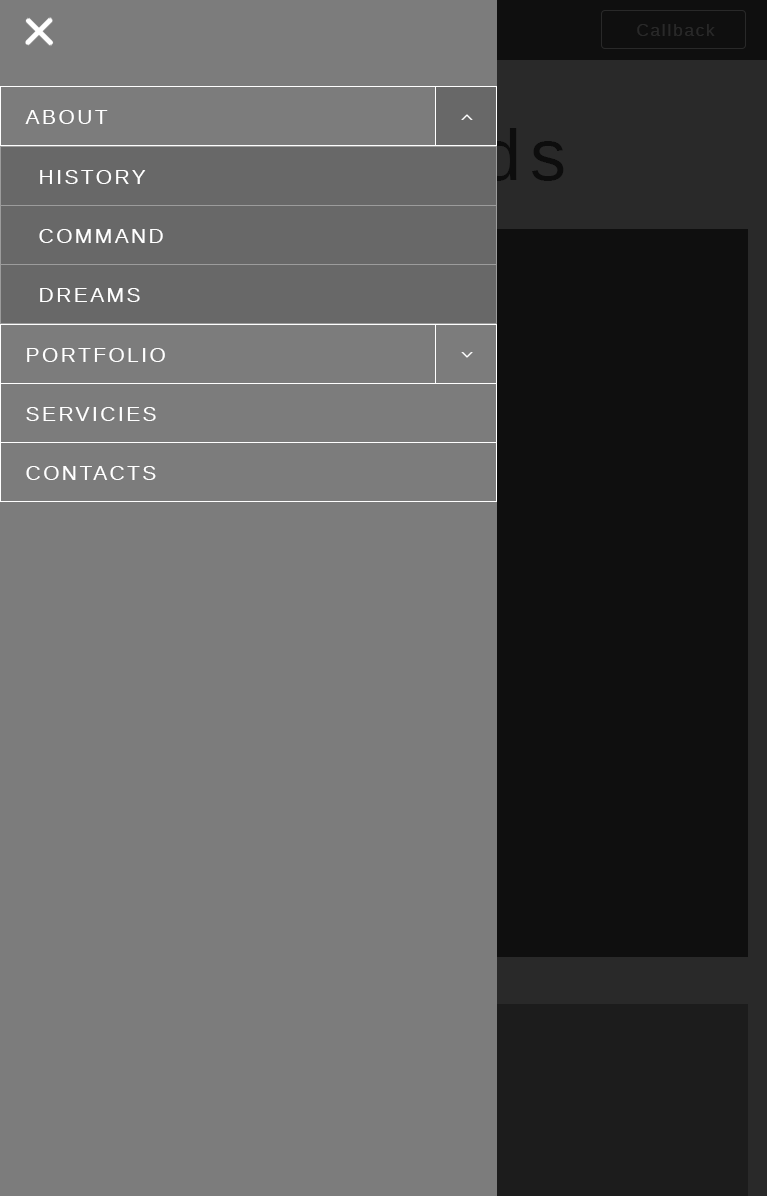
<style>
.page{position:relative;width:767px;height:1196px;background:#7c7c7c}
.page>*{position:absolute;margin:0}
.t1{font:16.6px "WineArial";letter-spacing:0.12em;color:#292929}
.t2{font:20.9px "WineArial";letter-spacing:0.12em;color:#ffffff}
</style>
<div class="page">
<p class="t1" style="left:637px;top:24px;width:78px;height:12px">Callback</p>
<p class="t2" style="left:25px;top:110px;width:83px;height:14px">ABOUT</p>
<p class="t2" style="left:40px;top:170px;width:106px;height:14px">HISTORY</p>
<p class="t2" style="left:39px;top:229px;width:124px;height:14px">COMMAND</p>
<p class="t2" style="left:40px;top:288px;width:100px;height:14px">DREAMS</p>
<p class="t2" style="left:27px;top:348px;width:138px;height:14px">PORTFOLIO</p>
<p class="t2" style="left:26px;top:407px;width:130px;height:14px">SERVICIES</p>
<p class="t2" style="left:26px;top:466px;width:130px;height:14px">CONTACTS</p>
</div>
